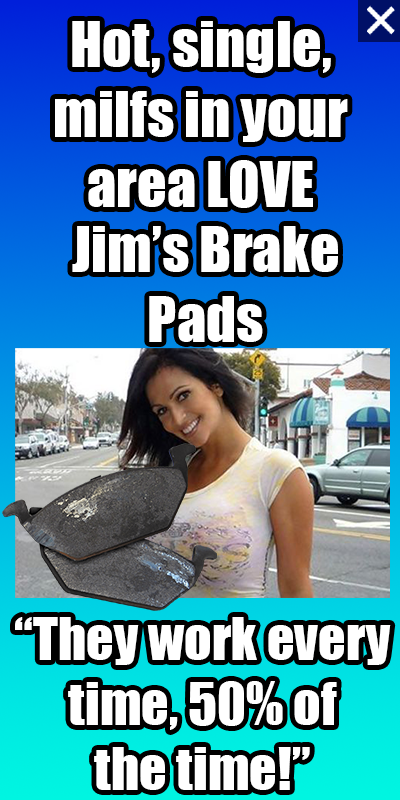
<style>
.page{position:relative;width:400px;height:800px}
.page>*{position:absolute;margin:0}
.t1{font:58.3px "Impact";color:#ffffff}
.t2{font:54.2px "Impact";color:#ffffff}
</style>
<div class="page">
<p class="t1" style="left:55px;top:21px;width:293px;height:187px;text-align:center">Hot, single,<br>milfs in your<br>area LOVE</p>
<p class="t1" style="left:72px;top:226px;width:266px;height:116px;text-align:center">Jim’s Brake<br>Pads</p>
<p class="t2" style="left:15px;top:617px;width:376px;height:173px;text-align:center">“They work every<br>time, 50% of<br>the time!”</p>
</div>
